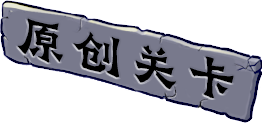
<style>
.page{position:relative;width:262px;height:123px;background:#ffffff}
.page>*{position:absolute;margin:0}
.t1{font:55.4px "GraveBustedStoneLishuSCRoughlyC";letter-spacing:0.14em;color:#000000}
</style>
<div class="page">
<p class="t1" style="left:17px;top:18px;width:217px;height:80px;rotate:13deg">原创关卡</p>
</div>
